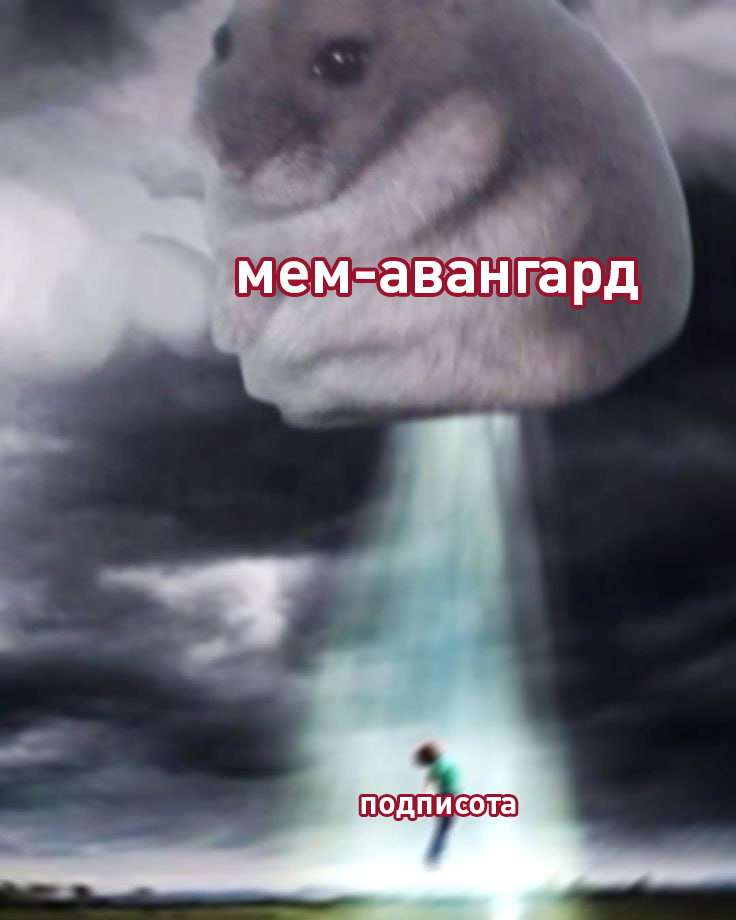
<style>
.page{position:relative;width:736px;height:920px}
.page>*{position:absolute;margin:0}
.t1{font:61.3px "Plumb-Bold";color:#ffffff}
.t2{font:33.1px "Plumb-Bold";color:#ffffff}
</style>
<div class="page">
<p class="t1" style="left:239px;top:261px;width:399px;height:44px">мем-авангард</p>
<p class="t2" style="left:361px;top:797px;width:155px;height:21px">подписота</p>
</div>
